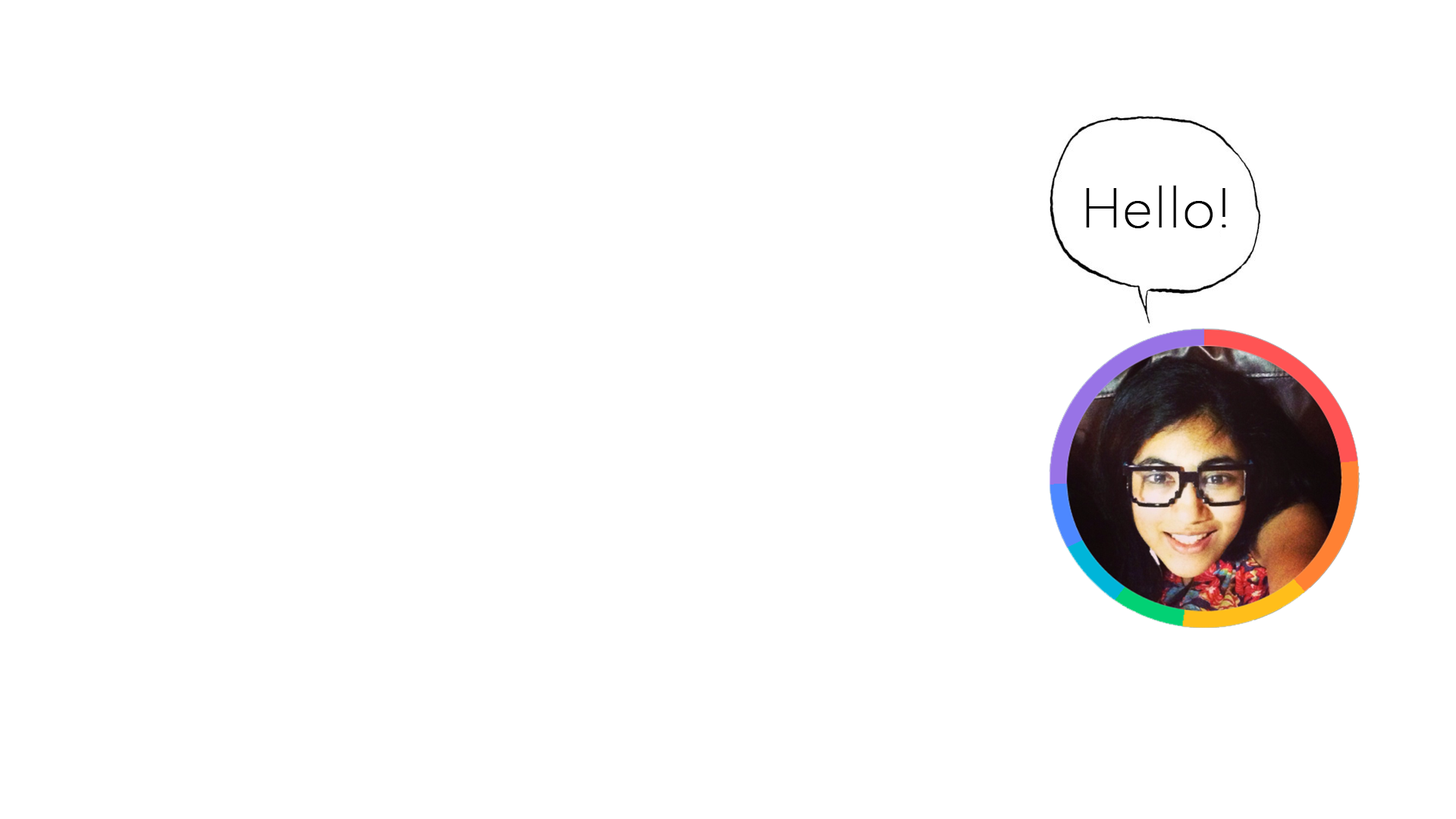
<style>
.page{position:relative;width:1456px;height:819px;background:#ffffff}
.page>*{position:absolute;margin:0}
.t1{font:54.6px "AvenirNext-UltraLight";color:#000000;font-weight:bold}
</style>
<div class="page">
<p class="t1" style="left:1086px;top:185px;width:140px;height:43px">Hello!</p>
</div>
